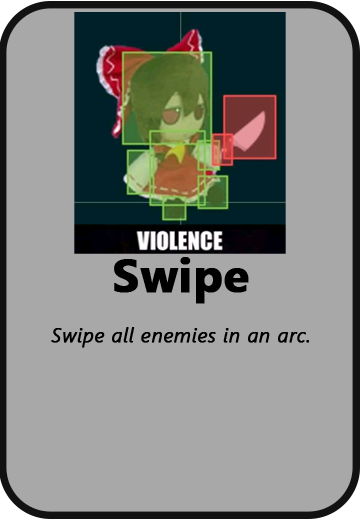
<style>
.page{position:relative;width:360px;height:520px;background:#a8a8a8}
.page>*{position:absolute;margin:0}
.t1{font:47px "SegoeUI-Bold";color:#000000;font-weight:bold}
.t2{font:20px "SegoeUI-SemilightItalic";color:#000000;font-weight:bold}
</style>
<div class="page">
<p class="t1" style="left:114px;top:257px;width:135px;height:47px">Swipe</p>
<p class="t2" style="left:51px;top:327px;width:258px;height:21px">Swipe all enemies in an arc.</p>
</div>
